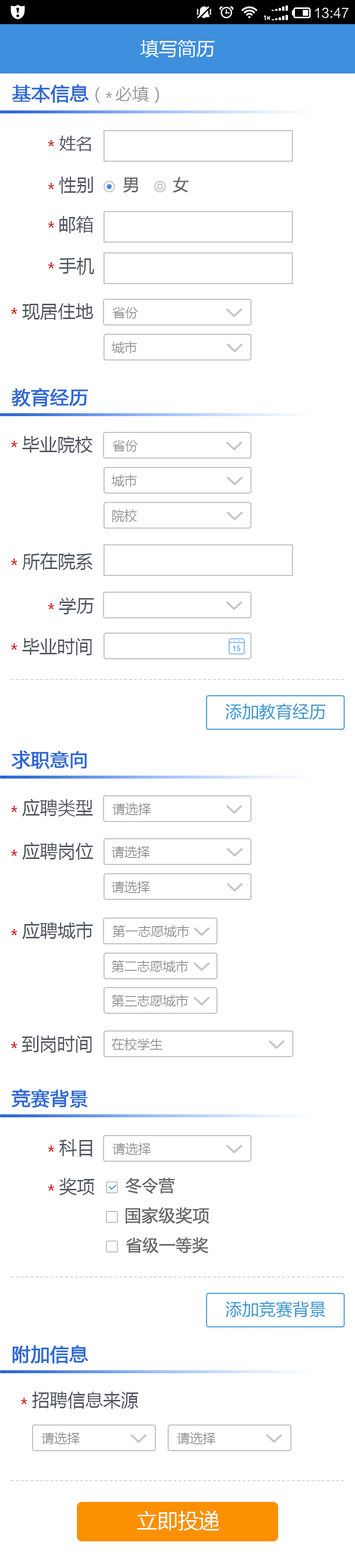
<style>
.page{position:relative;width:355px;height:1568px;background:#ffffff}
.page>*{position:absolute;margin:0}
.t1{font:18.7px "MicrosoftYaHei";color:#ffffff}
.t2{font:16.8px "MicrosoftYaHei";color:#999999}
.t3{font:18.7px "MicrosoftYaHei";color:#3069d4;font-weight:bold}
.t4{font:16.8px "MicrosoftYaHei";color:#525761}
.t5{font:16.8px "MicrosoftYaHei";color:#cc0000}
.t6{font:17.8px "MicrosoftYaHei";color:#525761}
.t7{font:16.1px "MicrosoftYaHei";color:#666666;font-weight:bold}
.t8{font:12.8px "MicrosoftYaHei";color:#999999}
.t9{font:18.7px "MicrosoftYaHei";color:#2f69d4;font-weight:bold}
.t10{font:16.8px "MicrosoftYaHei";color:#3c97ce}
.t11{font:16.8px "MicrosoftYaHei";color:#666666;font-weight:bold}
.t12{font:20.7px "MicrosoftYaHei";color:#ffffff}
</style>
<div class="page">
<p class="t1" style="left:140px;top:40px;width:75px;height:18px">填写简历</p>
<p class="t2" style="left:12px;top:84px;width:147px;height:19px"><span class="t3">基本信息</span>（  必填）</p>
<p class="t2" style="left:106px;top:92px;width:6px;height:6px">＊</p>
<p class="t4" style="left:59px;top:136px;width:32px;height:15px">姓名</p>
<p class="t5" style="left:48px;top:140px;width:6px;height:6px">*</p>
<p class="t5" style="left:48px;top:183px;width:6px;height:6px">*</p>
<p class="t6" style="left:59px;top:177px;width:34px;height:17px">性别</p>
<p class="t7" style="left:123px;top:178px;width:16px;height:15px">男</p>
<p class="t7" style="left:173px;top:177px;width:16px;height:16px">女</p>
<p class="t5" style="left:48px;top:221px;width:6px;height:7px">*</p>
<p class="t6" style="left:59px;top:216px;width:35px;height:17px">邮箱</p>
<p class="t6" style="left:59px;top:257px;width:35px;height:18px">手机</p>
<p class="t5" style="left:48px;top:262px;width:6px;height:7px">*</p>
<p class="t6" style="left:22px;top:303px;width:71px;height:17px">现居住地</p>
<p class="t5" style="left:11px;top:308px;width:6px;height:6px">*</p>
<p class="t8" style="left:112px;top:307px;width:26px;height:12px">省份</p>
<p class="t8" style="left:111px;top:341px;width:26px;height:13px">城市</p>
<p class="t9" style="left:11px;top:388px;width:77px;height:19px">教育经历</p>
<p class="t6" style="left:22px;top:436px;width:71px;height:17px">毕业院校</p>
<p class="t5" style="left:11px;top:441px;width:6px;height:6px">*</p>
<p class="t8" style="left:112px;top:440px;width:26px;height:12px">省份</p>
<p class="t8" style="left:111px;top:474px;width:26px;height:13px">城市</p>
<p class="t8" style="left:112px;top:509px;width:25px;height:13px">院校</p>
<p class="t6" style="left:22px;top:552px;width:71px;height:18px">所在院系</p>
<p class="t5" style="left:11px;top:559px;width:6px;height:6px">*</p>
<p class="t5" style="left:48px;top:603px;width:6px;height:6px">*</p>
<p class="t6" style="left:59px;top:598px;width:35px;height:16px">学历</p>
<p class="t6" style="left:22px;top:638px;width:70px;height:17px">毕业时间</p>
<p class="t5" style="left:11px;top:643px;width:6px;height:7px">*</p>
<p class="t10" style="left:225px;top:703px;width:101px;height:17px">添加教育经历</p>
<p class="t9" style="left:11px;top:750px;width:76px;height:19px">求职意向</p>
<p class="t5" style="left:11px;top:806px;width:6px;height:6px">*</p>
<p class="t6" style="left:22px;top:799px;width:71px;height:18px">应聘类型</p>
<p class="t8" style="left:112px;top:803px;width:39px;height:12px">请选择</p>
<p class="t6" style="left:22px;top:842px;width:71px;height:18px">应聘岗位</p>
<p class="t8" style="left:111px;top:846px;width:39px;height:12px">请选择</p>
<p class="t5" style="left:11px;top:850px;width:6px;height:6px">*</p>
<p class="t8" style="left:111px;top:881px;width:39px;height:12px">请选择</p>
<p class="t5" style="left:11px;top:929px;width:6px;height:6px">*</p>
<p class="t6" style="left:22px;top:922px;width:71px;height:17px">应聘城市</p>
<p class="t8" style="left:112px;top:925px;width:77px;height:12px">第一志愿城市</p>
<p class="t8" style="left:111px;top:960px;width:77px;height:12px">第二志愿城市</p>
<p class="t8" style="left:111px;top:995px;width:77px;height:12px">第三志愿城市</p>
<p class="t6" style="left:22px;top:1035px;width:70px;height:18px">到岗时间</p>
<p class="t8" style="left:111px;top:1038px;width:52px;height:13px">在校学生</p>
<p class="t5" style="left:11px;top:1042px;width:6px;height:6px">*</p>
<p class="t9" style="left:11px;top:1089px;width:77px;height:19px">竞赛背景</p>
<p class="t5" style="left:48px;top:1145px;width:6px;height:7px">*</p>
<p class="t6" style="left:59px;top:1139px;width:33px;height:18px">科目</p>
<p class="t8" style="left:112px;top:1142px;width:39px;height:13px">请选择</p>
<p class="t6" style="left:59px;top:1178px;width:36px;height:17px">奖项</p>
<p class="t7" style="left:125px;top:1177px;width:50px;height:17px">冬令营</p>
<p class="t5" style="left:48px;top:1184px;width:6px;height:7px">*</p>
<p class="t11" style="left:125px;top:1207px;width:85px;height:17px">国家级奖项</p>
<p class="t7" style="left:126px;top:1237px;width:83px;height:16px">省级一等奖</p>
<p class="t10" style="left:225px;top:1301px;width:100px;height:17px">添加竞赛背景</p>
<p class="t9" style="left:12px;top:1345px;width:76px;height:19px">附加信息</p>
<p class="t5" style="left:21px;top:1398px;width:6px;height:6px">*</p>
<p class="t6" style="left:32px;top:1391px;width:107px;height:18px">招聘信息来源</p>
<p class="t8" style="left:41px;top:1432px;width:39px;height:12px">请选择</p>
<p class="t8" style="left:177px;top:1432px;width:38px;height:12px">请选择</p>
<p class="t12" style="left:137px;top:1510px;width:82px;height:21px">立即投递</p>
</div>
